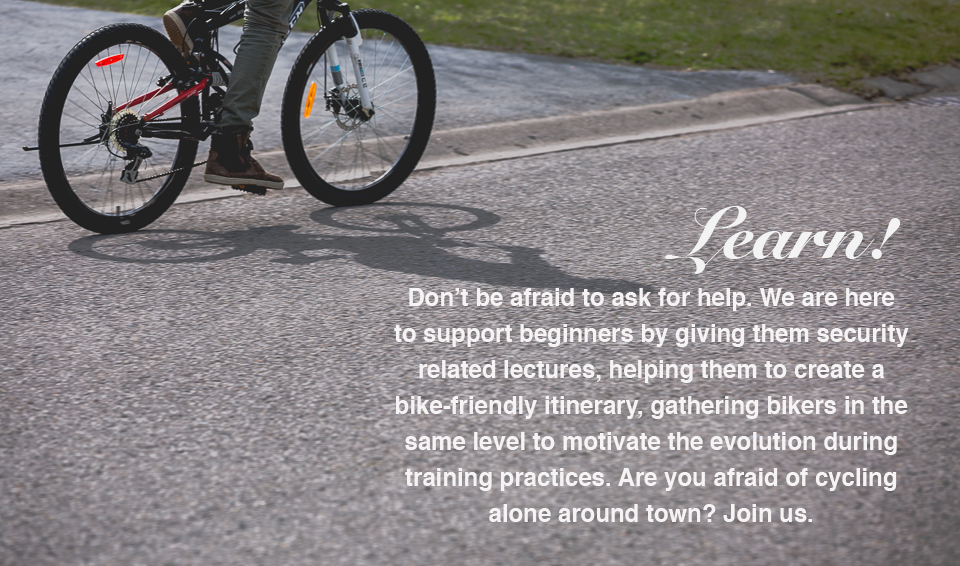
<style>
.page{position:relative;width:960px;height:566px}
.page>*{position:absolute;margin:0}
.t1{font:72px "SnellRoundhand-Black";color:#f3f3f3}
.t2{font:24px/36px "Helvetica-Bold";color:#f5f3f3}
</style>
<div class="page">
<p class="t1" style="left:665px;top:206px;width:236px;height:68px">Learn!</p>
<p class="t2" style="left:394px;top:288px;width:515px;height:234px;text-align:center">Don’t be afraid to ask for help. We are here to support beginners by giving them security related lectures, helping them to create a bike-friendly itinerary, gathering bikers in the same level to motivate the evolution during training practices. Are you afraid of cycling alone around town? Join us.</p>
</div>
